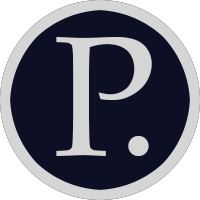
<style>
.page{position:relative;width:200px;height:200px;background:#0d1025}
.page>*{position:absolute;margin:0}
.t1{font:172px "Palatino-Roman";letter-spacing:-0.1em;color:#d5d5d5}
</style>
<div class="page">
<p class="t1" style="left:56px;top:37px;width:96px;height:119px">P.</p>
</div>
